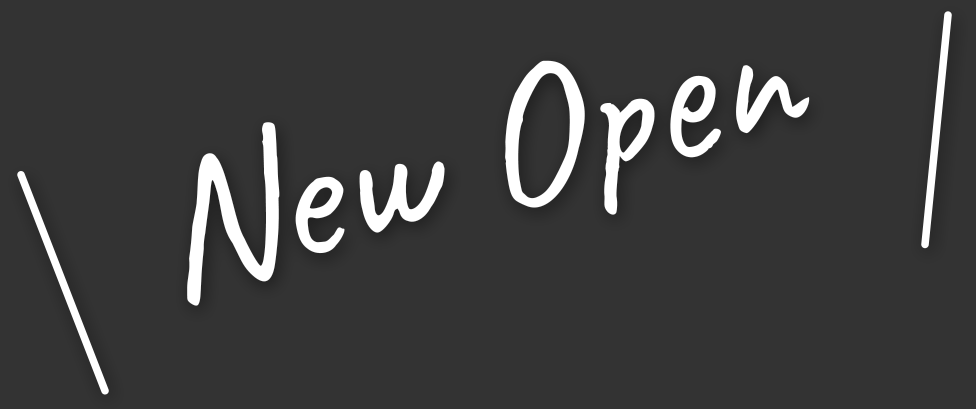
<style>
.page{position:relative;width:976px;height:409px;background:#333333}
.page>*{position:absolute;margin:0}
.t1{font:198.1px "Caveat-Regular";color:#ffffff}
</style>
<div class="page">
<p class="t1" style="left:187px;top:60px;width:623px;height:246px;rotate:-15deg">New Open</p>
</div>
